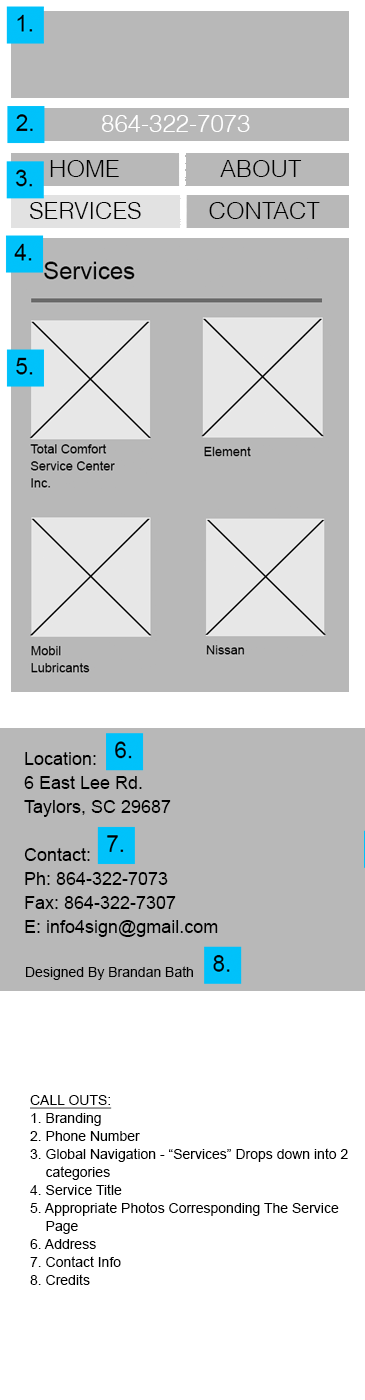
<style>
.page{position:relative;width:365px;height:1400px;background:#b8b8b8}
.page>*{position:absolute;margin:0}
.t1{font:24px "Helvetica-Light";color:#ffffff}
.t2{font:24px/14px "Helvetica-Light";color:#000000}
.t3{font:18px/24px "ArialMT";color:#000000}
.t4{font:14px "ArialMT";color:#000000}
.t5{font:14px/18px "ArialMT";color:#000000}
.t6{font:14px/18px "ArialMT";color:#000000;text-decoration:underline}
</style>
<div class="page">
<p class="t1" style="left:102px;top:115px;width:148px;height:17px">864-322-7073</p>
<p class="t2" style="left:30px;top:160px;width:290px;height:59px">HOME               ABOUT<br><br><br>SERVICES          CONTACT</p>
<p class="t3" style="left:24px;top:752px;width:147px;height:65px">Location:<br>6 East Lee Rd.<br>Taylors, SC 29687</p>
<p class="t3" style="left:24px;top:848px;width:194px;height:89px">Contact:<br>Ph: 864-322-7073<br>Fax: 864-322-7307<br>E: info4sign@gmail.com</p>
<p class="t4" style="left:26px;top:966px;width:167px;height:14px">Designed By Brandan Bath</p>
<p class="t5" style="left:30px;top:1095px;width:318px;height:190px"><span class="t6">CALL OUTS:<br></span>1. Branding<br>2. Phone Number<br>3. Global Navigation - “Services” Drops down into 2 <br>    categories<br>4. Service Title<br>5. Appropriate Photos Corresponding The Service <br>    Page<br>6. Address<br>7. Contact Info<br>8. Credits</p>
</div>
